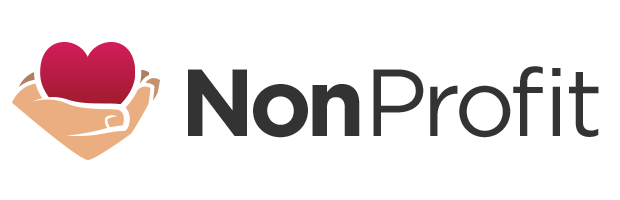
<style>
.page{position:relative;width:620px;height:200px;background:#ffffff}
.page>*{position:absolute;margin:0}
.t1{font:95.1px "Gotham-Book";letter-spacing:-0.025em;color:#333333}
.t2{font:95.1px "Gotham-Bold";letter-spacing:-0.025em;color:#333333}
</style>
<div class="page">
<p class="t1" style="left:188px;top:66px;width:411px;height:72px"><span class="t2">Non</span>Profit</p>
</div>
